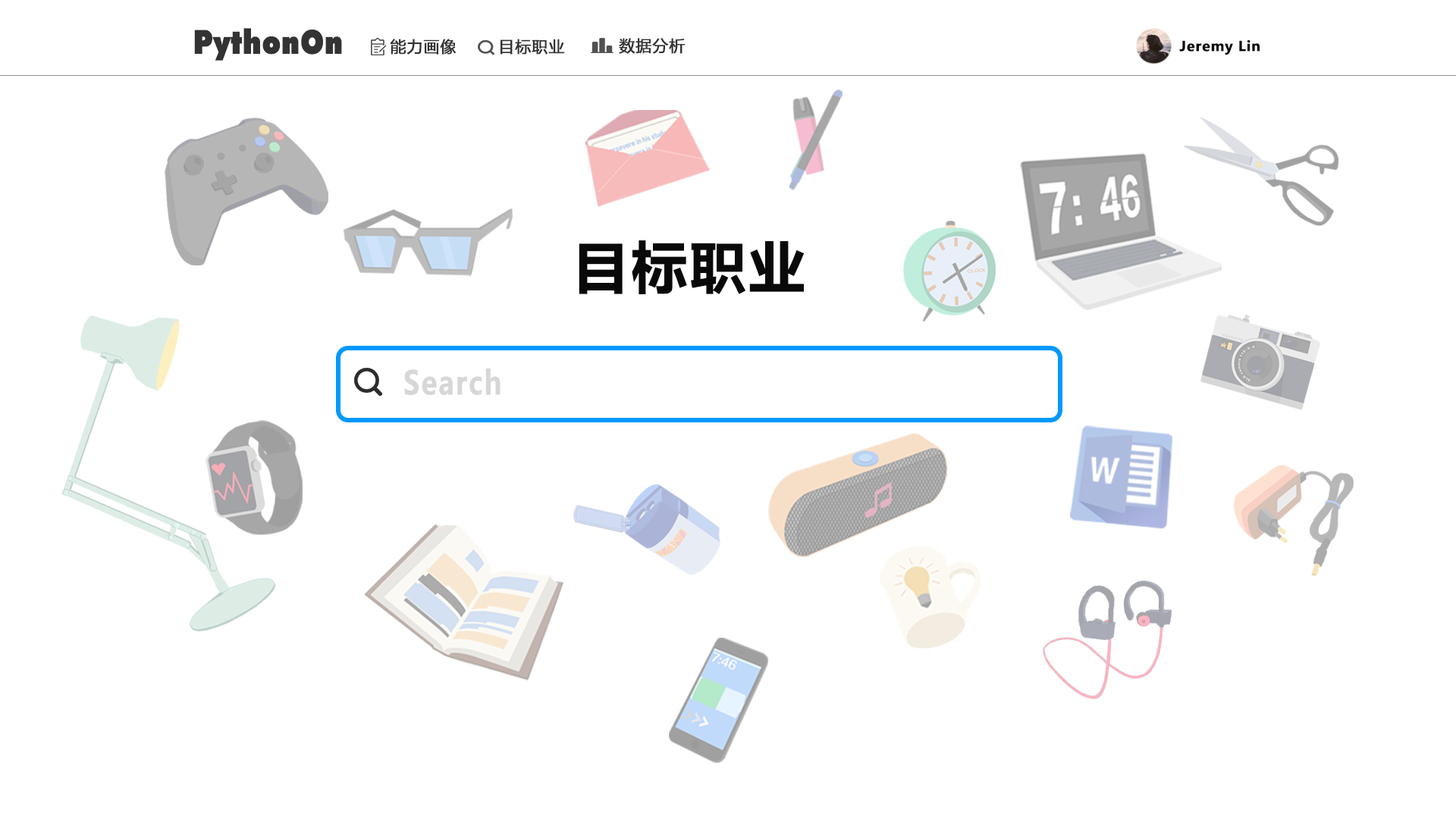
<style>
.page{position:relative;width:1456px;height:819px;background:#ffffff}
.page>*{position:absolute;margin:0}
.t1{font:32.5px "LimerickSerialHeavy";letter-spacing:0.03em;color:#333333;font-weight:bold;scale:0.85 1}
.t2{font:15.8px "MicrosoftYaHei";letter-spacing:0.03em;color:#333333;font-weight:bold}
.t3{font:13.6px "MicrosoftYaHeiUI-Bold";letter-spacing:0.03em;color:#090909;font-weight:bold}
.t4{font:55.5px "MicrosoftYaHeiUI-Bold";letter-spacing:0.03em;color:#090909;font-weight:bold}
.t5{font:32.5px "MicrosoftYaHeiUI-Bold";letter-spacing:0.03em;color:#d8d6d6;font-weight:bold;scale:0.83 1}
</style>
<div class="page">
<p class="t1" style="left:194px;top:28px;width:148px;height:33px">PythonOn</p>
<p class="t2" style="left:390px;top:39px;width:67px;height:16px">能力画像</p>
<p class="t2" style="left:500px;top:39px;width:65px;height:16px">目标职业</p>
<p class="t2" style="left:619px;top:38px;width:67px;height:16px">数据分析</p>
<p class="t3" style="left:1179px;top:40px;width:81px;height:15px">Jeremy Lin</p>
<p class="t4" style="left:579px;top:240px;width:226px;height:54px">目标职业</p>
<p class="t5" style="left:404px;top:368px;width:96px;height:27px">Search</p>
</div>
